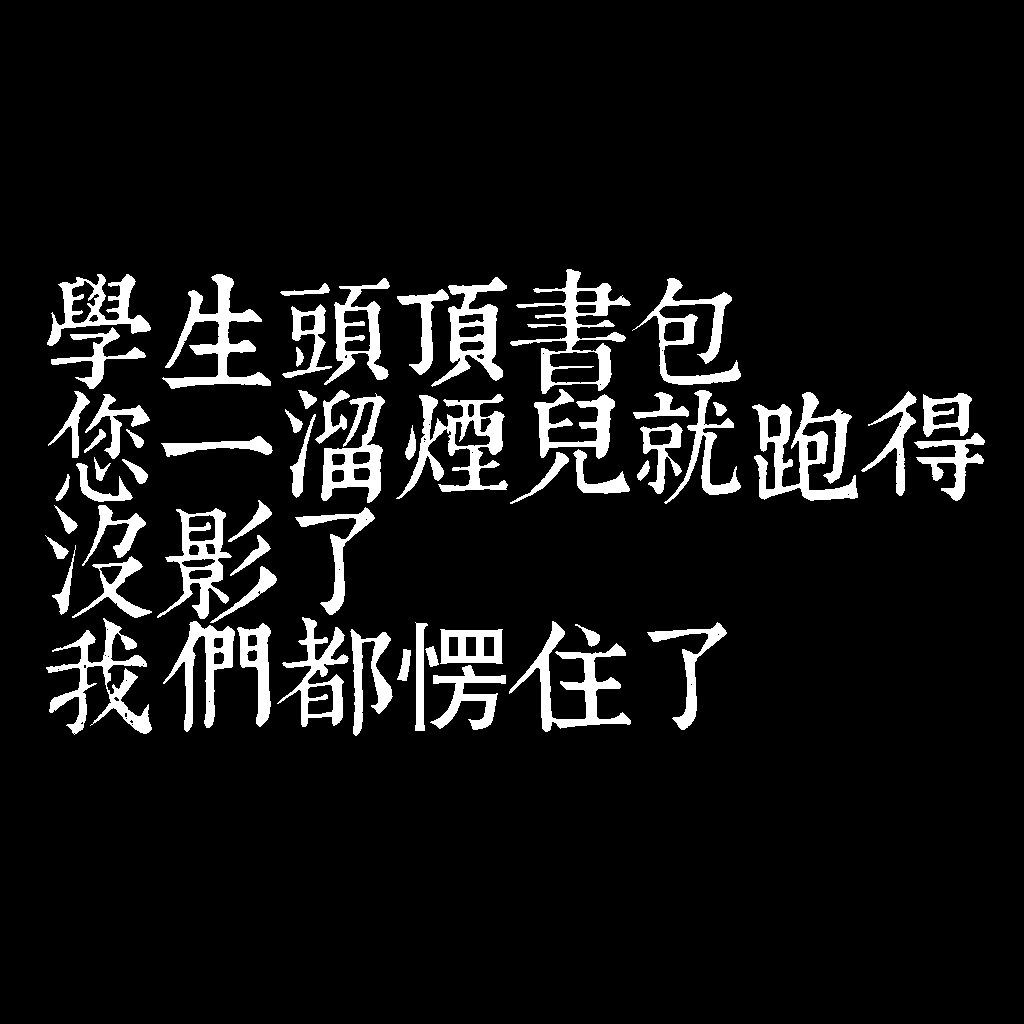
<style>
.page{position:relative;width:1024px;height:1024px;background:#000000}
.page>*{position:absolute;margin:0}
.t1{font:120px/115px "TpldKhangXiDictTrial";letter-spacing:-0.02em;color:#ffffff}
.t2{font:120px/115px "AdobeHeitiStd-Regular";letter-spacing:-0.02em;color:#ffffff}
</style>
<div class="page">
<p class="t1" style="left:45px;top:269px;width:940px;height:467px">學生頭頂書包<br>您一溜煙兒就跑得<br>沒影了<br>我們都<span class="t2">愣</span>住了</p>
</div>
